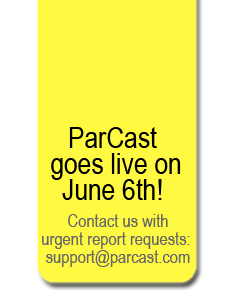
<style>
.page{position:relative;width:240px;height:300px;background:#fff942}
.page>*{position:absolute;margin:0}
.t1{font:30px/26px "ArialNarrow";color:#000000}
.t2{font:18px/18px "ArialNarrow";color:#676767}
</style>
<div class="page">
<p class="t1" style="left:51px;top:127px;width:130px;height:73px;text-align:center">ParCast <br>goes live on<br>June 6th!</p>
<p class="t2" style="left:42px;top:214px;width:148px;height:53px;text-align:center">Contact us with<br>urgent report requests: <br>support@parcast.com</p>
</div>
